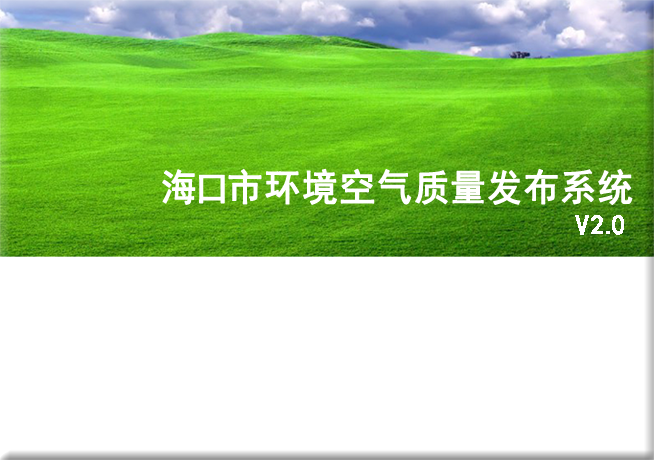
<style>
.page{position:relative;width:654px;height:460px;background:#ffffff}
.page>*{position:absolute;margin:0}
.t1{font:37.3px "SimHei";letter-spacing:0.1em;color:#ffffff;font-weight:bold;scale:0.95 1}
.t2{font:26.7px "SimHei";letter-spacing:0.1em;color:#ffffff;font-weight:bold}
</style>
<div class="page">
<p class="t1" style="left:162px;top:168px;width:471px;height:37px">海口市环境空气质量发布系统</p>
<p class="t2" style="left:575px;top:215px;width:49px;height:20px">V2.0</p>
</div>
